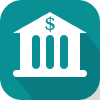
<style>
.page{position:relative;width:100px;height:100px;background:#099095}
.page>*{position:absolute;margin:0}
.t1{font:18.5px "KelmscottRoman";color:#099095}
</style>
<div class="page">
<p class="t1" style="left:45px;top:16px;width:10px;height:17px">$</p>
</div>
